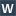
<style>
.page{position:relative;width:16px;height:16px;background:#2c3e50}
.page>*{position:absolute;margin:0}
.t1{font:12.5px "Daum_SemiBold";color:#ffffff;scale:0.9 1}
</style>
<div class="page">
<p class="t1" style="left:1px;top:4px;width:13px;height:9px">W</p>
</div>
